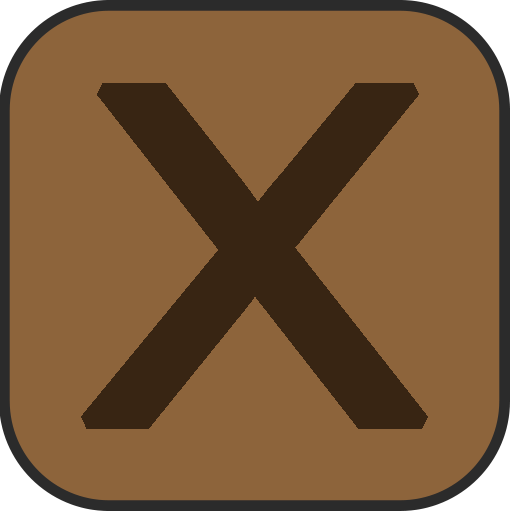
<style>
.page{position:relative;width:512px;height:512px;background:#8d643b}
.page>*{position:absolute;margin:0}
.t1{font:461.6px "ArialMT";letter-spacing:-0.025em;color:#382513;font-variant:small-caps;font-weight:bold;scale:1.11 1}
</style>
<div class="page">
<p class="t1" style="left:81px;top:83px;width:347px;height:346px">X</p>
</div>
